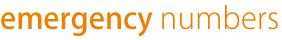
<style>
.page{position:relative;width:282px;height:40px;background:#ffffff}
.page>*{position:absolute;margin:0}
.t1{font:30px "KozGoStd-Medium";color:#eb8001}
.t2{font:30px "KozGoStd-Light";color:#eb8001}
</style>
<div class="page">
<p class="t1" style="left:1px;top:5px;width:277px;height:32px">emergency <span class="t2">numbers</span></p>
</div>
